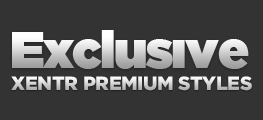
<style>
.page{position:relative;width:263px;height:120px;background:#333333}
.page>*{position:absolute;margin:0}
.t1{font:51.8px "GothamUltra";letter-spacing:-0.03em}
.t2{font:19.2px "Gotham-Black";letter-spacing:-0.02em;text-transform:uppercase}
</style>
<div class="page">
<p class="t1" style="left:12px;top:30px;width:237px;height:39px">Exclusıve</p>
<p class="t2" style="left:11px;top:76px;width:241px;height:15px">XenTR Premium styles</p>
</div>
